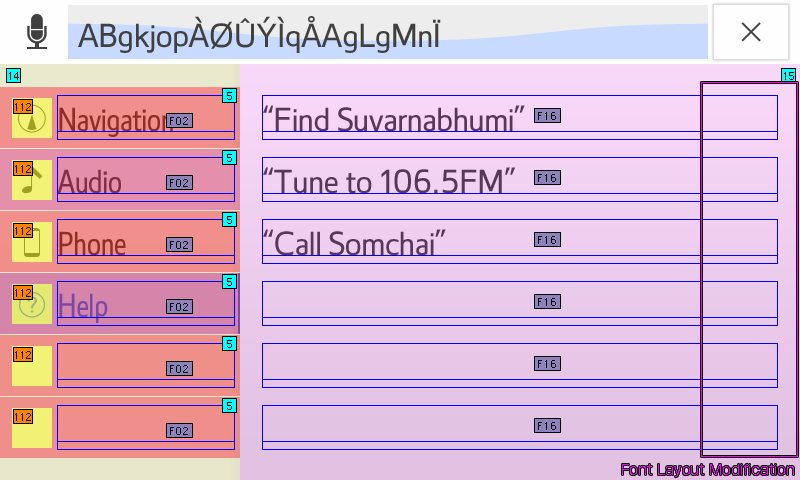
<style>
.page{position:relative;width:800px;height:480px}
.page>*{position:absolute;margin:0}
.t1{font:30px "Tfont1502_T1S";color:#404041}
.t2{font:30px "Tfont1502_T2S";color:#8e2e26}
.t3{font:30px/62px "Tfont1502_T1S";color:#583859}
.t4{font:30px "Tfont1502_T2S";color:#832e47}
.t5{font:30px "Tfont1502_T2S";color:#7b48a8}
.t6{font:14px "ShinGoPro-Regular";color:#ff00ff}
</style>
<div class="page">
<p class="t1" style="left:78px;top:16px;width:363px;height:37px">ABgkjopÀØÛÝÌqÅAgLgMnÏ</p>
<p class="t2" style="left:59px;top:107px;width:114px;height:30px">Navigation</p>
<p class="t3" style="left:263px;top:105px;width:262px;height:151px">“Find Suvarnabhumi”<br>“Tune to 106.5FM”<br>“Call Somchai”</p>
<p class="t4" style="left:57px;top:169px;width:64px;height:25px">Audio</p>
<p class="t2" style="left:59px;top:231px;width:67px;height:25px">Phone</p>
<p class="t5" style="left:59px;top:293px;width:49px;height:30px">Help</p>
<p class="t6" style="left:622px;top:464px;width:172px;height:13px">Font Layout Modification</p>
</div>
